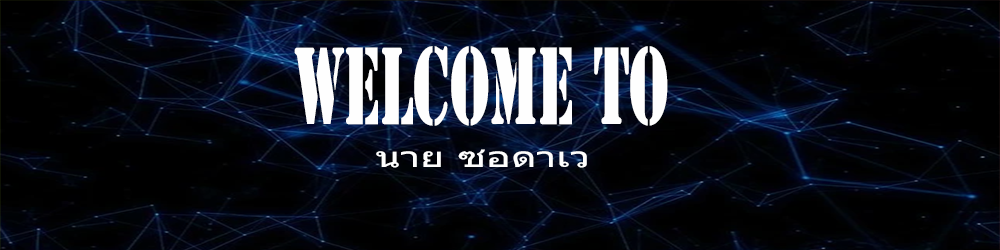
<style>
.page{position:relative;width:1000px;height:250px}
.page>*{position:absolute;margin:0}
.t1{font:101.9px "StencilStd";color:#fefefe;scale:0.54 1}
.t2{font:28.1px "Tahoma";color:#fefefe;scale:1.48 1}
</style>
<div class="page">
<p class="t1" style="left:294px;top:46px;width:374px;height:80px">Welcome to</p>
<p class="t2" style="left:376px;top:149px;width:211px;height:19px">นาย ซอดาเว</p>
</div>
